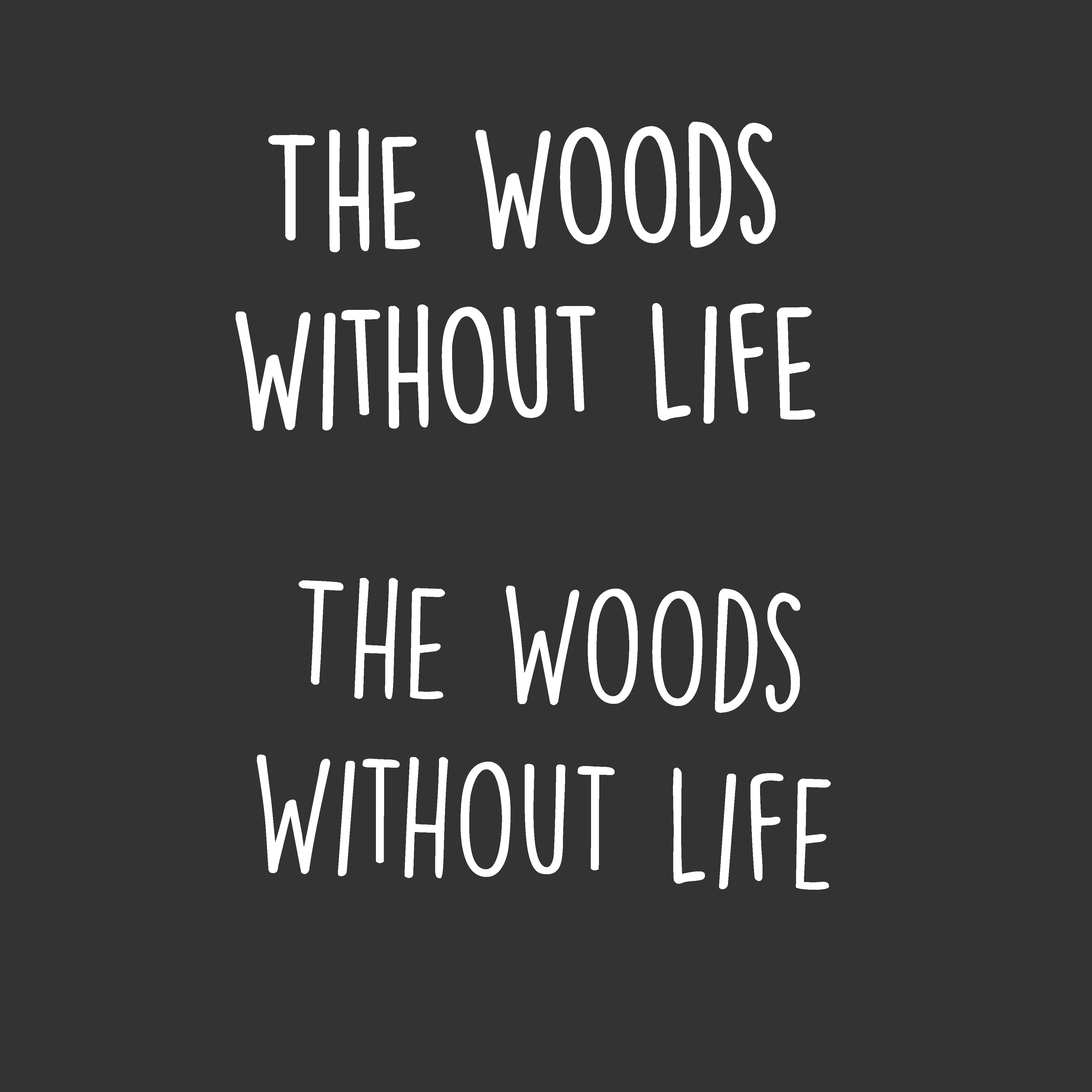
<style>
.page{position:relative;width:1092px;height:1092px;background:#333333}
.page>*{position:absolute;margin:0}
.t1{font:147.8px "DKLemonYellowSun";color:#ffffff}
</style>
<div class="page">
<p class="t1" style="left:236px;top:123px;width:578px;height:307px;text-align:center;rotate:-1deg">The Woods<br>Without Life</p>
<p class="t1" style="left:257px;top:578px;width:574px;height:312px;text-align:center;rotate:2deg">The Woods<br>Without Life</p>
</div>
